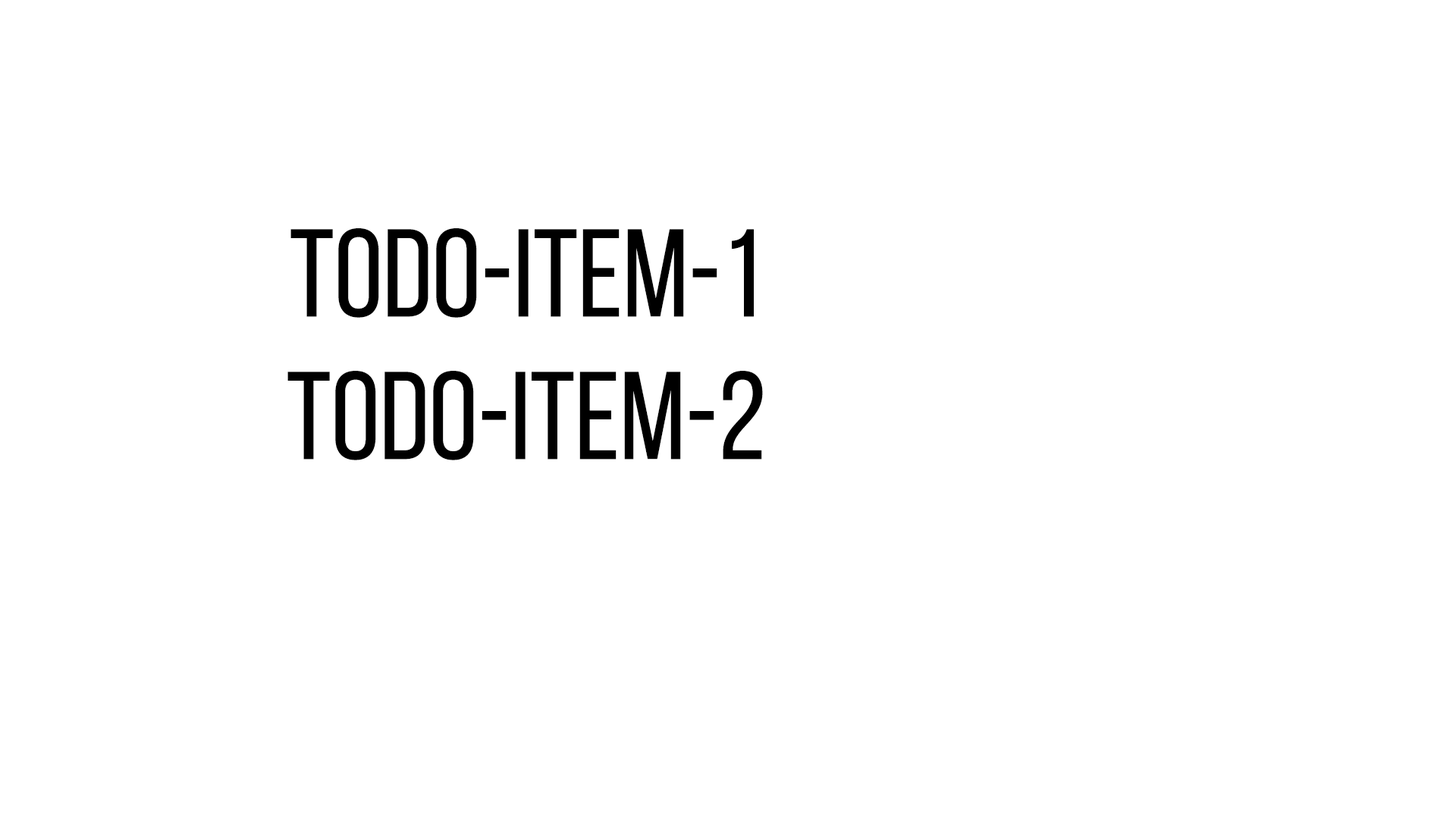
<style>
.page{position:relative;width:1456px;height:819px;background:#ffffff}
.page>*{position:absolute;margin:0}
.t1{font:124.6px "BebasNeueRegular";color:#000000}
</style>
<div class="page">
<p class="t1" style="left:290px;top:228px;width:464px;height:90px">todo-item-1</p>
<p class="t1" style="left:287px;top:371px;width:476px;height:89px">todo-item-2</p>
</div>
